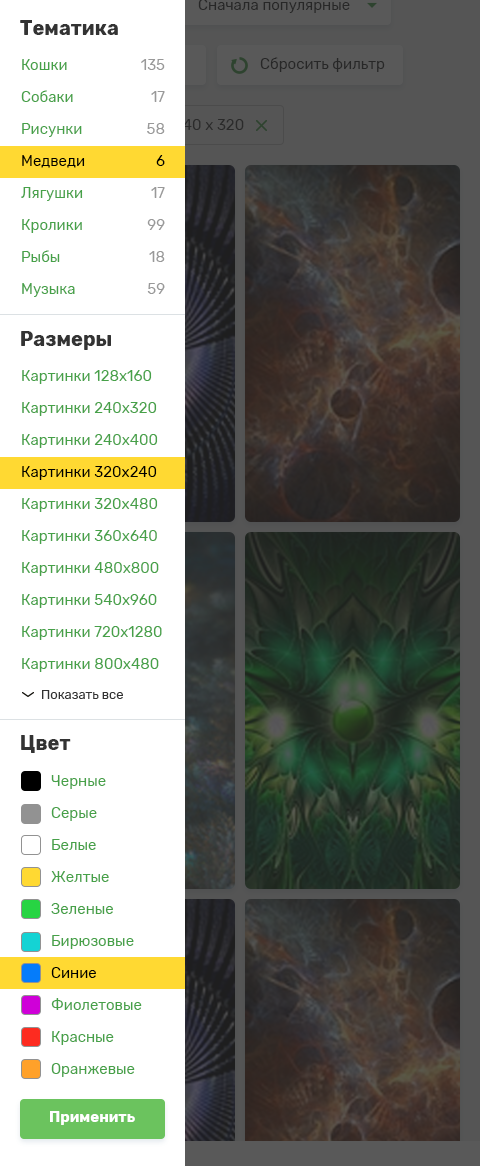
<style>
.page{position:relative;width:480px;height:1166px;background:#ffffff}
.page>*{position:absolute;margin:0}
.t1{font:20px "Rubik-Bold";color:#333333}
.t2{font:15px "Rubik-Regular";color:#46a148}
.t3{font:15px "Rubik-Regular";color:#000000}
.t4{font:15px "Rubik-Regular";color:#999999}
.t5{font:13px "Rubik-Regular";color:#333333}
.t6{font:15px "Rubik-Bold";color:#ffffff}
</style>
<div class="page">
<p class="t1" style="left:20px;top:20px;width:98px;height:15px">Тематика</p>
<p class="t2" style="left:21px;top:59px;width:64px;height:238px">Кошки<br>Собаки<br>Рисунки<br><span class="t3">Медведи<br></span>Лягушки<br>Кролики<br>Рыбы<br>Музыка</p>
<p class="t4" style="left:141px;top:59px;width:24px;height:235px;text-align:right">135<br>17<br>58<br><span class="t3">6<br></span>17<br>99<br>18<br>59</p>
<p class="t1" style="left:21px;top:331px;width:90px;height:19px">Размеры</p>
<p class="t2" style="left:22px;top:370px;width:140px;height:329px">Картинки 128x160<br>Картинки 240x320<br>Картинки 240x400<br><span class="t3">Картинки 320x240<br></span>Картинки 320x480<br>Картинки 360x640<br>Картинки 480x800<br>Картинки 540x960<br>Картинки 720x1280<br>Картинки 800x480<br><span class="t5">Показать все</span></p>
<p class="t1" style="left:21px;top:735px;width:50px;height:18px">Цвет</p>
<p class="t2" style="left:51px;top:775px;width:91px;height:302px">Черные<br>Серые<br>Белые<br>Желтые<br>Зеленые<br>Бирюзовые<br><span class="t3">Синие<br></span>Фиолетовые<br>Красные<br>Оранжевые</p>
<p class="t6" style="left:50px;top:1111px;width:85px;height:14px">Применить</p>
</div>
